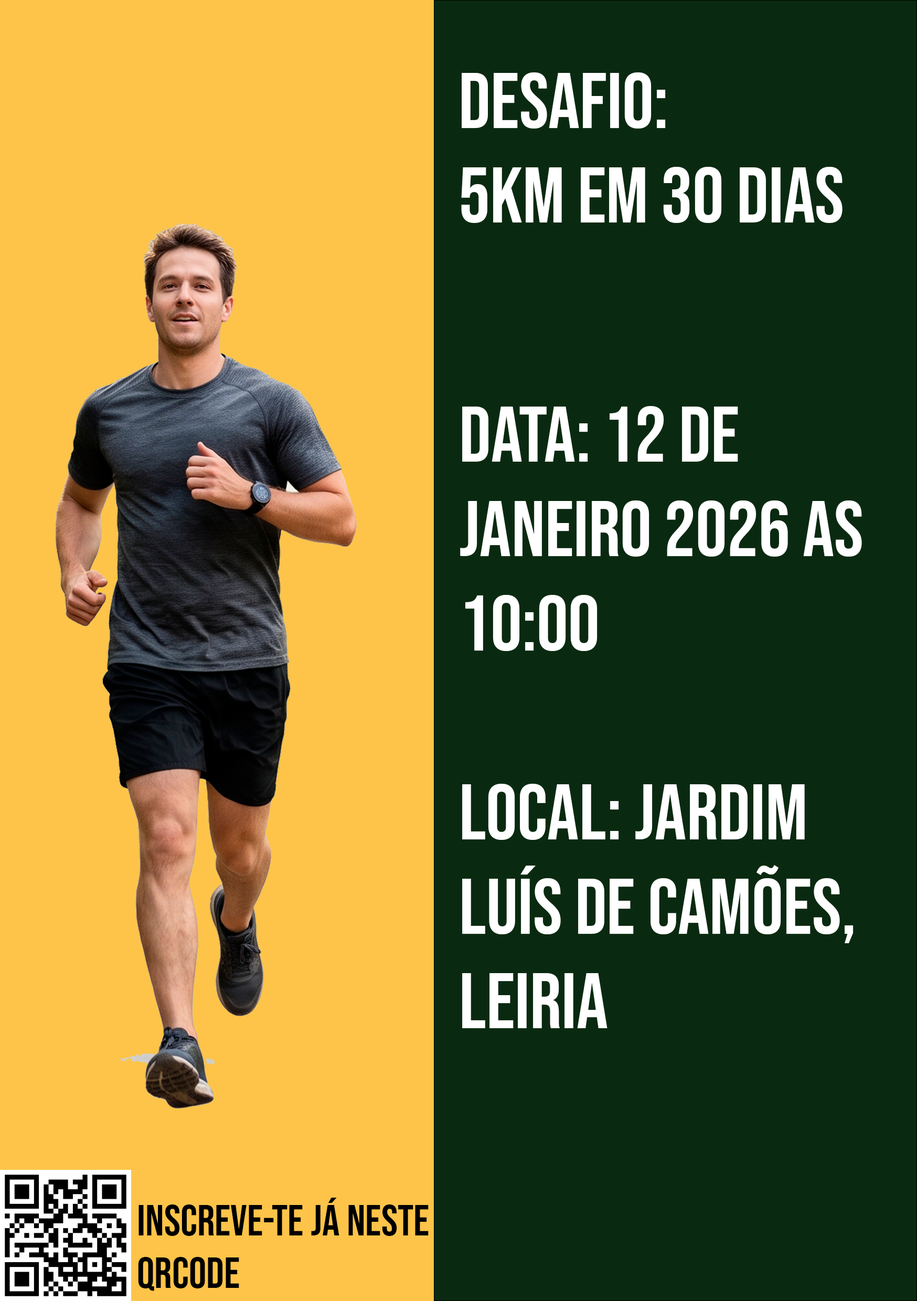
<style>
.page{position:relative;width:917px;height:1301px;background:#092a10}
.page>*{position:absolute;margin:0}
.t1{font:78.7px "BebasNeue-Regular";color:#ffffff}
.t2{font:43.7px "BebasNeue-Regular";color:#000000}
</style>
<div class="page">
<p class="t1" style="left:461px;top:72px;width:381px;height:151px">Desafio:<br>5km Em 30 dias</p>
<p class="t1" style="left:460px;top:406px;width:402px;height:622px">Data: 12 de Janeiro 2026 as 10:00<br><br>Local: Jardim Luís de Camões, Leiria</p>
<p class="t2" style="left:138px;top:1197px;width:290px;height:94px">Inscreve-te já neste QRCOde</p>
</div>
